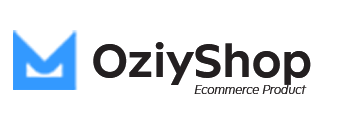
<style>
.page{position:relative;width:340px;height:120px;background:#ffffff}
.page>*{position:absolute;margin:0}
.t1{font:48px "Neuwelt-Bold";letter-spacing:0.025em;color:#231f20}
.t2{font:12px "Neuwelt-ExtraLightItalic";letter-spacing:0.025em;color:#231f20}
</style>
<div class="page">
<p class="t1" style="left:93px;top:42px;width:218px;height:43px">OziyShop</p>
<p class="t2" style="left:194px;top:85px;width:113px;height:9px">Ecommerce Product</p>
</div>
